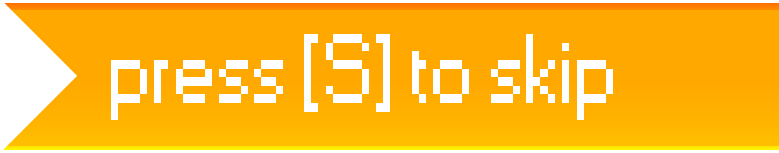
<style>
.page{position:relative;width:779px;height:153px;background:#ffa800}
.page>*{position:absolute;margin:0}
.t1{font:91.7px "Small Fonts";color:#ffffff}
</style>
<div class="page">
<p class="t1" style="left:111px;top:34px;width:502px;height:86px">press [S] to skip</p>
</div>
